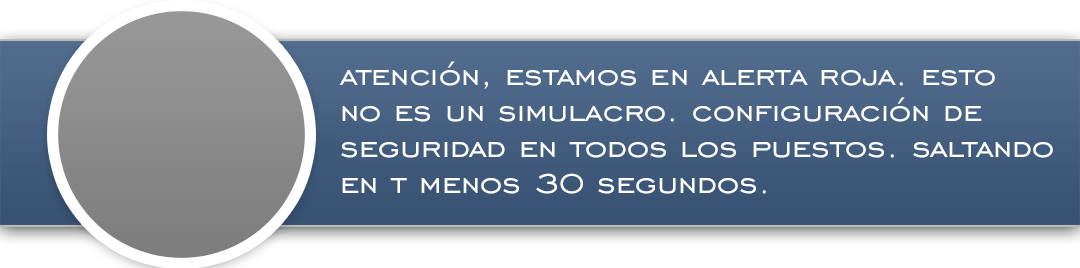
<style>
.page{position:relative;width:1080px;height:268px}
.page>*{position:absolute;margin:0}
.t1{font:36px/36px "EngraversGothicBT-Regular";color:#ffffff;scale:1.06 1}
</style>
<div class="page">
<p class="t1" style="left:339px;top:61px;width:714px;height:133px">atención, estamos en alerta roja. esto<br>no es un simulacro. configuración de<br>seguridad en todos los puestos. saltando<br>en t menos 30 segundos.</p>
</div>
